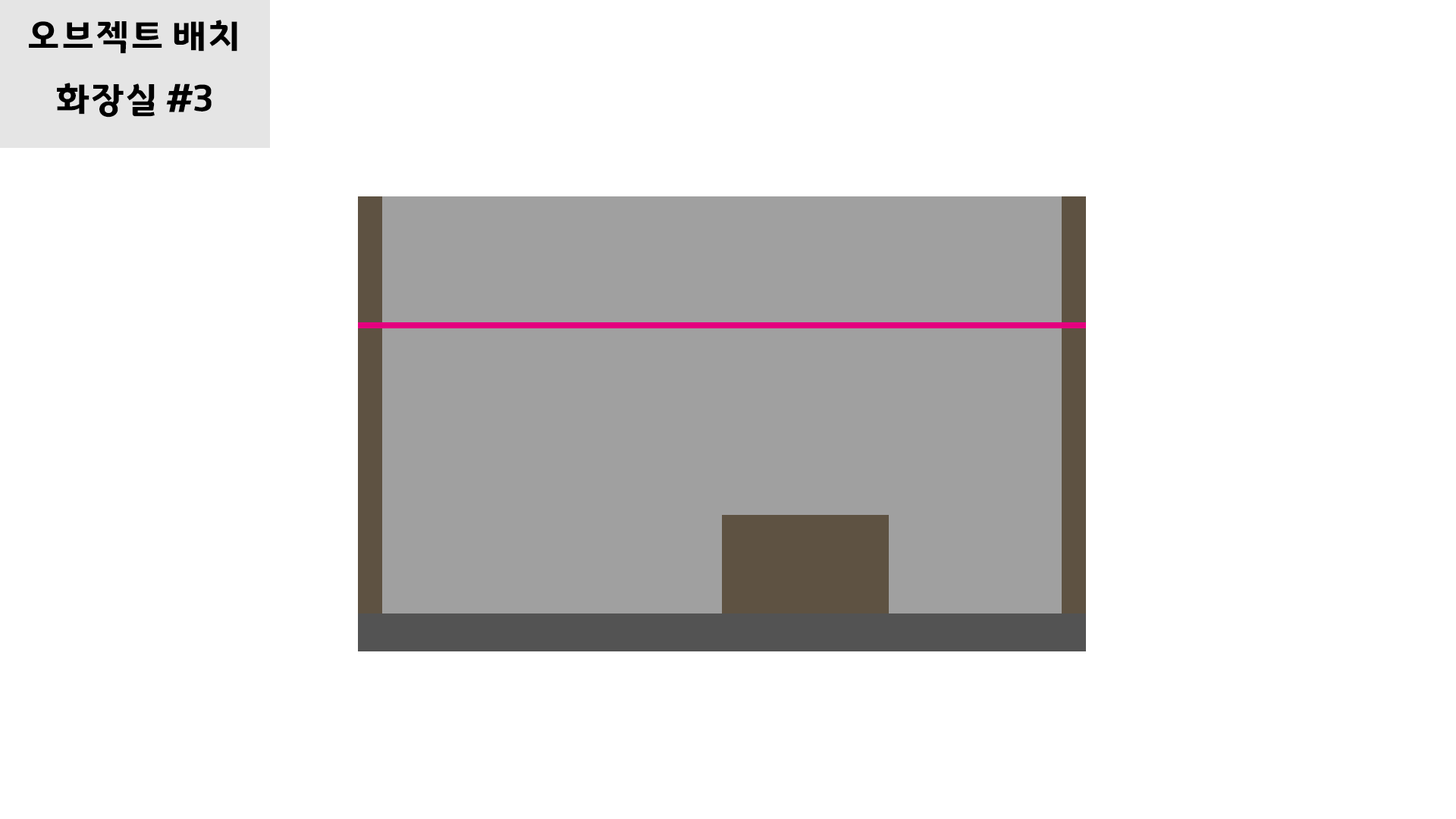
<style>
.page{position:relative;width:1456px;height:819px;background:#ffffff}
.page>*{position:absolute;margin:0}
.t1{font:36.4px "GyeonggiTitleV";letter-spacing:-0.05em;color:#000000}
</style>
<div class="page">
<p class="t1" style="left:29px;top:20px;width:208px;height:34px">오브젝트 배치</p>
<p class="t1" style="left:57px;top:83px;width:155px;height:35px">화장실 #3</p>
</div>
